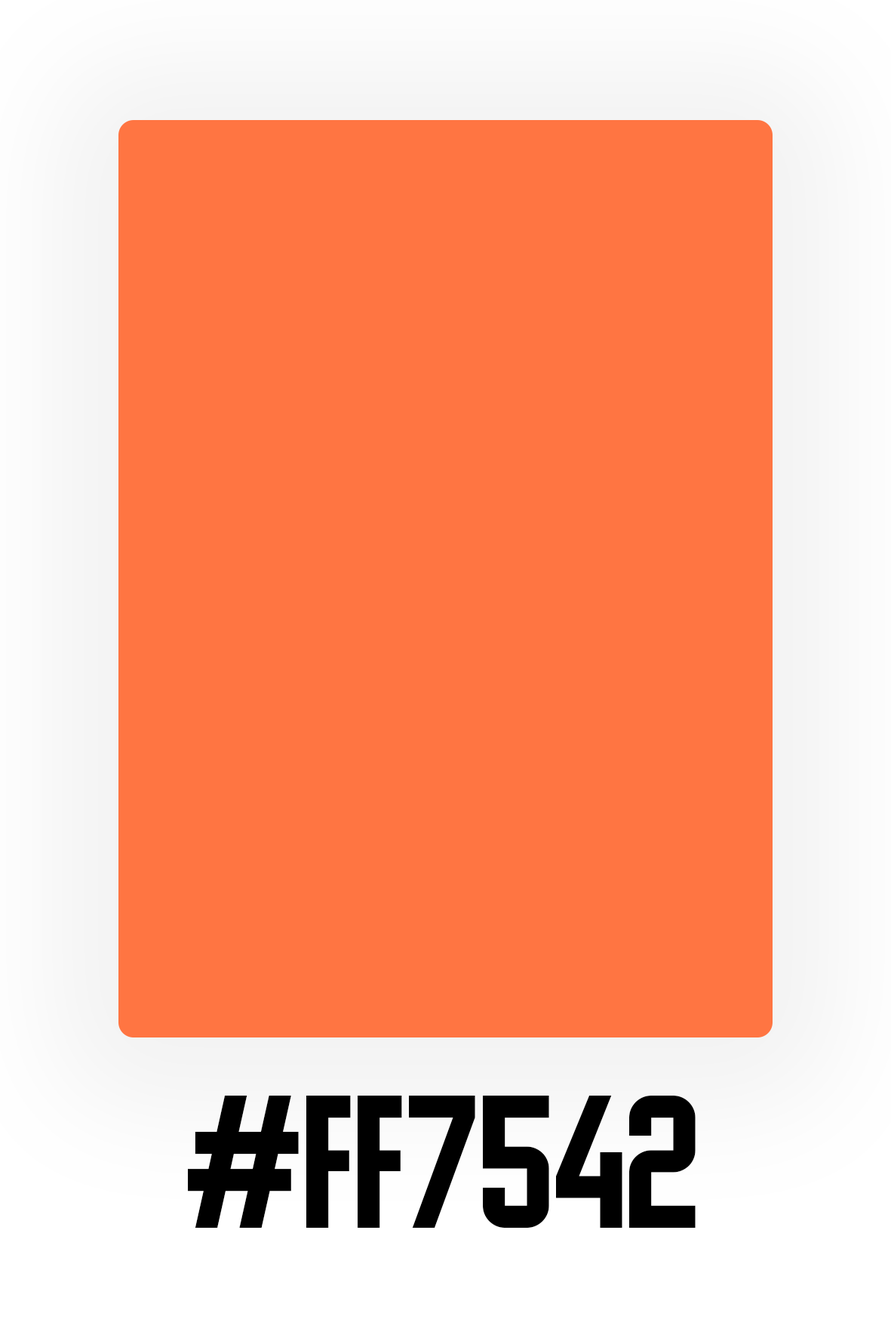
<style>
.page{position:relative;width:891px;height:1338px;background:#ff7542}
.page>*{position:absolute;margin:0}
.t1{font:151px "Ponter";color:#000000}
</style>
<div class="page">
<p class="t1" style="left:188px;top:1095px;width:508px;height:132px">#ff7542</p>
</div>
